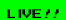
<style>
.page{position:relative;width:66px;height:20px;background:#00ff00}
.page>*{position:absolute;margin:0}
.t1{font:10px "MegaMan-2";color:#000000}
</style>
<div class="page">
<p class="t1" style="left:7px;top:9px;width:52px;height:9px">Live!!</p>
</div>
